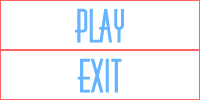
<style>
.page{position:relative;width:200px;height:100px;background:#ffffff}
.page>*{position:absolute;margin:0}
.t1{font:45px "HuxleyTitling";color:#64b4ff}
</style>
<div class="page">
<p class="t1" style="left:75px;top:8px;width:49px;height:35px">Play</p>
<p class="t1" style="left:77px;top:58px;width:45px;height:35px">Exit</p>
</div>
